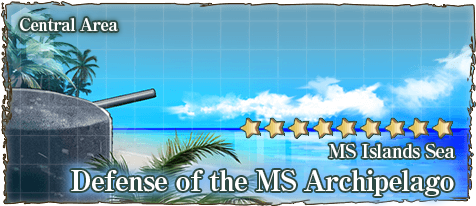
<style>
.page{position:relative;width:476px;height:206px}
.page>*{position:absolute;margin:0}
.t1{font:17px "RyuminPro-ExBold";letter-spacing:-0.04em;color:#ffffff}
.t2{font:19px "RyuminPro-ExBold";letter-spacing:-0.04em;color:#ffffff}
.t3{font:28px "RyuminPro-ExBold";letter-spacing:-0.04em;color:#ffffff}
</style>
<div class="page">
<p class="t1" style="left:20px;top:18px;width:98px;height:13px">Central Area</p>
<p class="t2" style="left:329px;top:143px;width:126px;height:16px">MS Islands Sea</p>
<p class="t3" style="left:71px;top:170px;width:383px;height:26px">Defense of the MS Archipelago</p>
</div>
